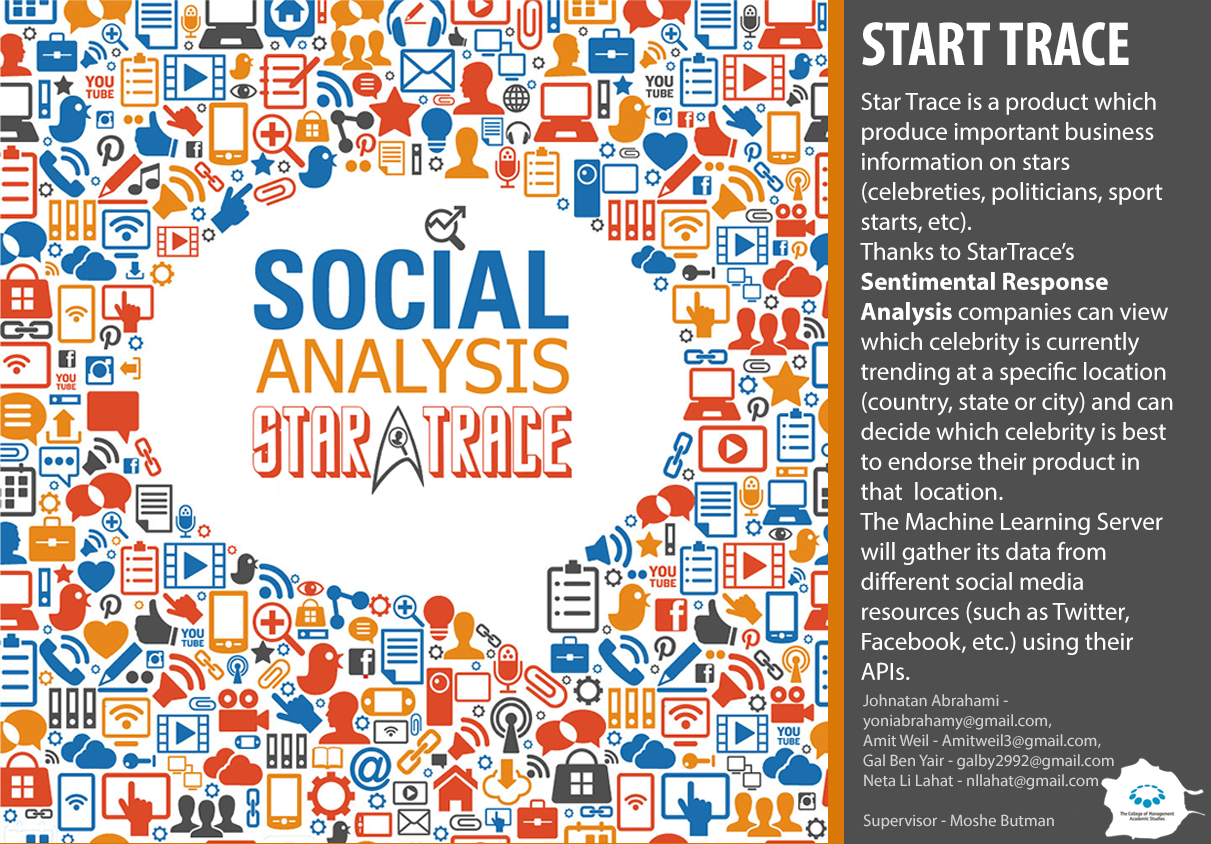
<style>
.page{position:relative;width:1211px;height:844px;background:#ffffff}
.page>*{position:absolute;margin:0}
.t1{font:62.5px "MyriadPro-BoldCond";color:#ffffff}
.t2{font:25px "MyriadHebrew-Regular";color:#ffffff}
.t3{font:25px "MyriadPro-Regular";color:#ffffff}
.t4{font:25px "MyriadPro-Bold";color:#ffffff}
.t5{font:16.7px "MyriadHebrew-Regular";color:#d4d2d2}
</style>
<div class="page">
<p class="t1" style="left:862px;top:22px;width:267px;height:44px">START TRACE</p>
<p class="t2" style="left:860px;top:92px;width:313px;height:588px">Star Trace is a product which<br>p<span class="t3">roduce important business <br>information on stars <br>(celebreties, politicians, sport starts, etc).<br>Thanks to StarTrace’s <br></span><span class="t4">Sentimental Response <br>Analysis </span><span class="t3">companies can view which celebrity is currently trending at a specific location (country, state or city)</span> and can  decide which celebrity is best to endorse their product in that  location.<br>The Machine Learning Server will gather its data from <br>different social media <br>resources (such as Twitter, Facebook, etc.) using their APIs.</p>
<p class="t5" style="left:863px;top:694px;width:251px;height:136px">Johnatan Abrahami - <br>yoniabrahamy@gmail.com, <br>Amit Weil - Amitweil3@gmail.com, <br>Gal Ben Yair - galby2992@gmail.com<br>Neta Li Lahat - nllahat@gmail.com<br><br>Supervisor - Moshe Butman</p>
</div>
